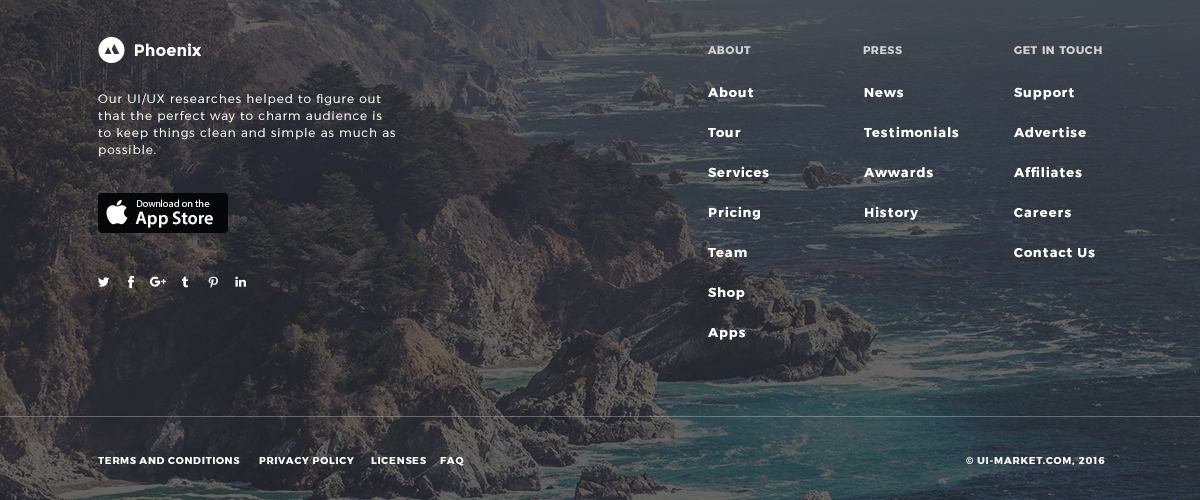
<style>
.page{position:relative;width:1200px;height:500px}
.page>*{position:absolute;margin:0}
.t1{font:16.4px "Montserrat-Bold";color:#ffffff}
.t2{font:11px "Montserrat-Bold";letter-spacing:0.07em;color:#d3d4d5;text-transform:uppercase}
.t3{font:11px "Montserrat-Bold";letter-spacing:0.07em;color:#d2d3d5;text-transform:uppercase}
.t4{font:13px/40px "Montserrat-Bold";letter-spacing:0.07em;color:#ffffff}
.t5{font:12px/17px "Montserrat-Light";letter-spacing:0.08em;color:#ffffff}
.t6{font:10px/17px "MyriadPro-Regular";color:#ffffff}
.t7{font:18px/17px "MyriadPro-Semibold";color:#ffffff}
.t8{font:10px "Montserrat-Bold";letter-spacing:0.07em;color:#ffffff;text-transform:uppercase}
.t9{font:10px "Montserrat-Bold";letter-spacing:0.08em;color:#ffffff;text-transform:uppercase}
</style>
<div class="page">
<p class="t1" style="left:135px;top:43px;width:66px;height:13px">Phoenix</p>
<p class="t2" style="left:708px;top:46px;width:43px;height:8px">About</p>
<p class="t3" style="left:863px;top:46px;width:39px;height:8px">Press</p>
<p class="t3" style="left:1014px;top:46px;width:88px;height:8px">get in touch</p>
<p class="t4" style="left:708px;top:87px;width:61px;height:253px">About<br>Tour<br>Services<br>Pricing<br>Team<br>Shop<br>Apps</p>
<p class="t4" style="left:864px;top:88px;width:95px;height:132px">News<br>Testimonials<br>Awwards<br>History</p>
<p class="t4" style="left:1014px;top:87px;width:81px;height:171px">Support<br>Advertise<br>Affiliates<br>Careers<br>Contact Us</p>
<p class="t5" style="left:98px;top:93px;width:297px;height:64px">Our UI/UX researches helped to figure out that the perfect way to charm audience is to keep things clean and simple as much as possible.</p>
<p class="t6" style="left:135px;top:199px;width:78px;height:29px">Download on the<br><span class="t7">App Store</span></p>
<p class="t8" style="left:98px;top:457px;width:366px;height:9px">Terms and Conditions       Privacy Policy      Licenses     FAQ</p>
<p class="t9" style="left:966px;top:457px;width:139px;height:8px">© UI-market.com, 2016</p>
</div>
